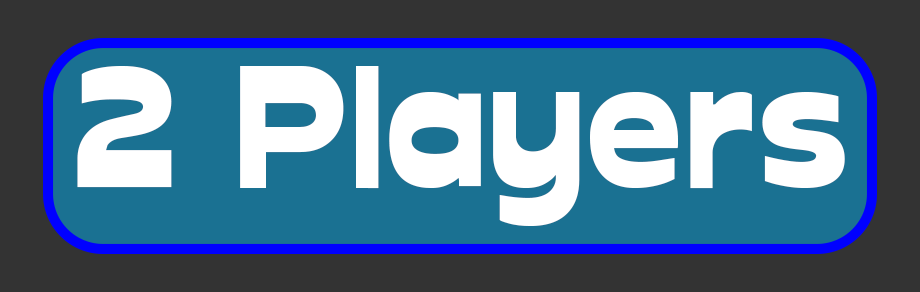
<style>
.page{position:relative;width:920px;height:292px;background:#1a7192}
.page>*{position:absolute;margin:0}
.t1{font:166.7px "Glockenspiel";color:#ffffff}
</style>
<div class="page">
<p class="t1" style="left:77px;top:66px;width:768px;height:160px">2 Players</p>
</div>
